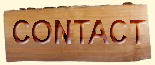
<style>
.page{position:relative;width:155px;height:65px}
.page>*{position:absolute;margin:0}
.t1{font:34px "ArialNarrow-Bold"}
</style>
<div class="page">
<p class="t1" style="left:13px;top:20px;width:133px;height:24px">CONTACT</p>
</div>
